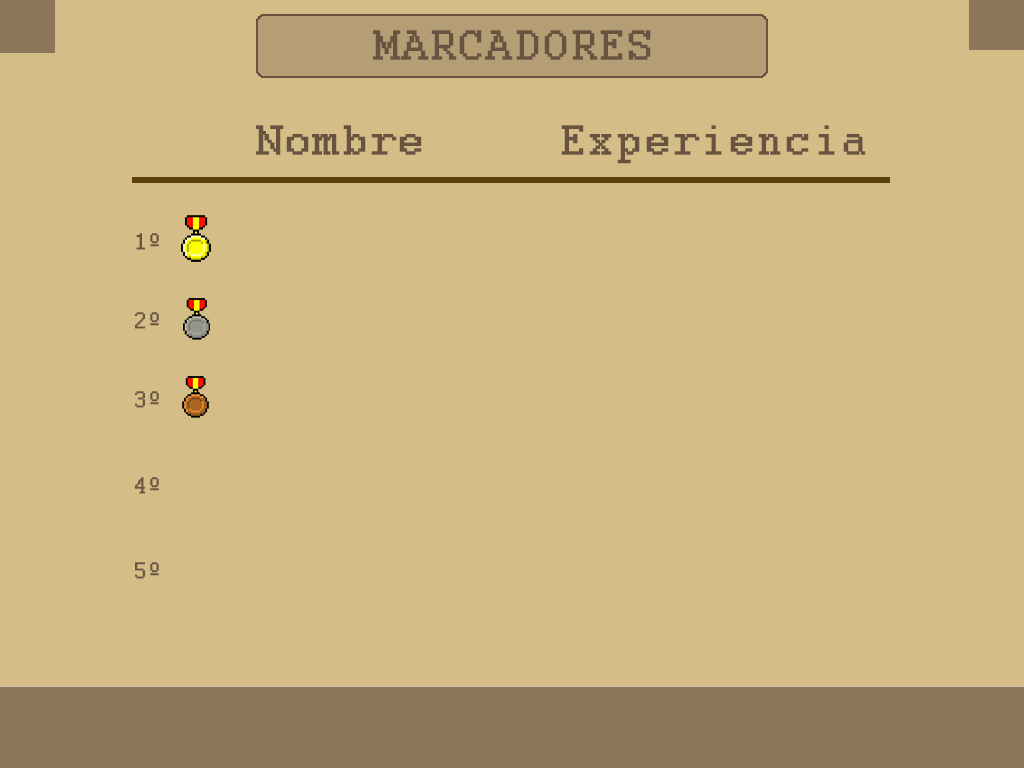
<style>
.page{position:relative;width:1024px;height:768px;background:#d4bd86}
.page>*{position:absolute;margin:0}
.t1{font:45.8px "Courier";letter-spacing:0.05em;color:#685341;font-weight:bold}
.t2{font:25px "Courier";letter-spacing:0.05em;color:#685341;font-weight:bold}
</style>
<div class="page">
<p class="t1" style="left:256px;top:125px;width:166px;height:30px">Nombre</p>
<p class="t1" style="left:561px;top:125px;width:305px;height:39px">Experiencia</p>
<p class="t2" style="left:136px;top:233px;width:23px;height:17px">1º</p>
<p class="t2" style="left:135px;top:312px;width:24px;height:17px">2º</p>
<p class="t2" style="left:135px;top:391px;width:24px;height:17px">3º</p>
<p class="t2" style="left:135px;top:477px;width:24px;height:17px">4º</p>
<p class="t2" style="left:135px;top:562px;width:24px;height:17px">5º</p>
</div>
